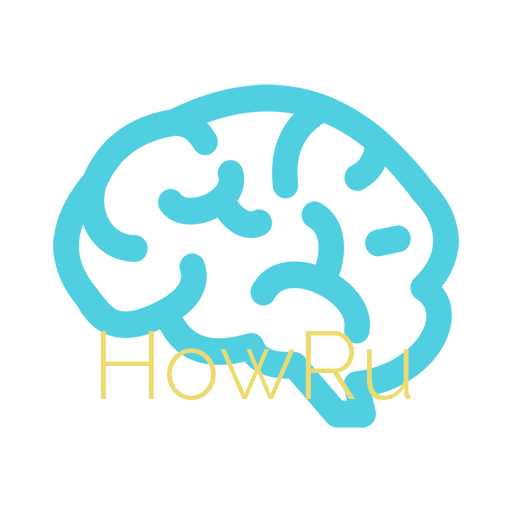
<style>
.page{position:relative;width:512px;height:512px;background:#ffffff}
.page>*{position:absolute;margin:0}
.t1{font:96px "Raleway-Light";letter-spacing:0.01em;color:#eddb70}
</style>
<div class="page">
<p class="t1" style="left:100px;top:331px;width:311px;height:69px">HowRu</p>
</div>
